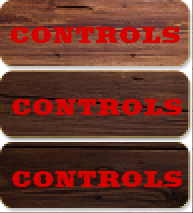
<style>
.page{position:relative;width:193px;height:213px}
.page>*{position:absolute;margin:0}
.t1{font:30px "Saddlebag-Black";color:#d60000}
</style>
<div class="page">
<p class="t1" style="left:9px;top:27px;width:171px;height:16px">CONTROLS</p>
<p class="t1" style="left:11px;top:99px;width:171px;height:16px">CONTROLS</p>
<p class="t1" style="left:11px;top:171px;width:171px;height:16px">CONTROLS</p>
</div>
